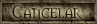
<style>
.page{position:relative;width:97px;height:24px}
.page>*{position:absolute;margin:0}
.t1{font:17.1px "Morpheus";color:#2c1a02}
</style>
<div class="page">
<p class="t1" style="left:12px;top:5px;width:73px;height:16px">Cancelar</p>
</div>
